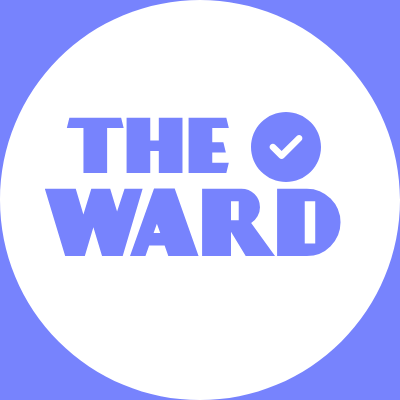
<style>
.page{position:relative;width:400px;height:400px;background:#ffffff}
.page>*{position:absolute;margin:0}
.t1{font:69px "DayPosterBlack";color:#7783fd}
.t2{font:84px "DayPosterBlack";color:#7783fd}
</style>
<div class="page">
<p class="t1" style="left:66px;top:117px;width:163px;height:57px">THE</p>
<p class="t2" style="left:44px;top:188px;width:297px;height:69px">WARD</p>
</div>
